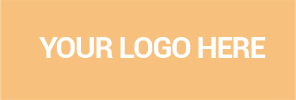
<style>
.page{position:relative;width:296px;height:100px;background:#f7c07d}
.page>*{position:absolute;margin:0}
.t1{font:30px "Roboto-Bold";letter-spacing:-0.042em;color:#ffffff}
</style>
<div class="page">
<p class="t1" style="left:39px;top:37px;width:227px;height:21px">YOUR LOGO HERE</p>
</div>
